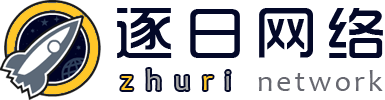
<style>
.page{position:relative;width:385px;height:100px;background:#ffffff}
.page>*{position:absolute;margin:0}
.t1{font:60px "TRENDS";letter-spacing:0.18em;color:#030828}
.t2{font:30px "Candara";letter-spacing:0.1em;color:#676870}
</style>
<div class="page">
<p class="t1" style="left:117px;top:8px;width:266px;height:50px">逐日网络</p>
<p class="t2" style="left:258px;top:70px;width:125px;height:21px">network</p>
</div>
